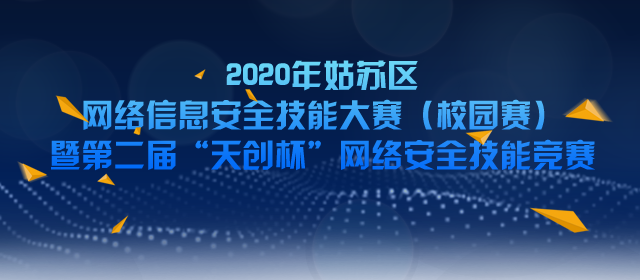
<style>
.page{position:relative;width:640px;height:280px}
.page>*{position:absolute;margin:0}
.t1{font:32.2px/39.8px "JLinXin"}
</style>
<div class="page">
<p class="t1" style="left:51px;top:60px;width:544px;height:111px;text-align:center">2020年姑苏区<br>网络信息安全技能大赛（校园赛）<br>暨第二届“天创杯”网络安全技能竞赛</p>
</div>
